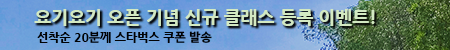
<style>
.page{position:relative;width:450px;height:50px}
.page>*{position:absolute;margin:0}
.t1{font:18px "NanumGothicExtraBold";color:#d3e9c2}
.t2{font:12px "NanumGothicExtraBold";color:#000000}
</style>
<div class="page">
<p class="t1" style="left:34px;top:9px;width:341px;height:17px">요기요기 오픈 기념 신규 클래스 등록 이벤트!</p>
<p class="t2" style="left:37px;top:31px;width:175px;height:12px">선착순 20분께 스타벅스 쿠폰 발송</p>
</div>
